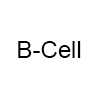
<style>
.page{position:relative;width:100px;height:100px;background:#ffffff}
.page>*{position:absolute;margin:0}
.t1{font:24px "ArialMT";color:#010101}
</style>
<div class="page">
<p class="t1" style="left:18px;top:41px;width:63px;height:17px">B-Cell</p>
</div>
